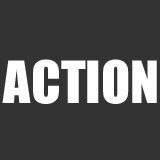
<style>
.page{position:relative;width:160px;height:160px;background:#333333}
.page>*{position:absolute;margin:0}
.t1{font:53.9px "Impact";color:#ffffff;text-transform:uppercase}
</style>
<div class="page">
<p class="t1" style="left:2px;top:59px;width:155px;height:45px">ACTION</p>
</div>
